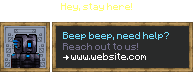
<style>
.page{position:relative;width:193px;height:72px;background:#292a2a}
.page>*{position:absolute;margin:0}
.t1{font:8px "Minecraft";color:#fffd75}
.t2{font:8px "Minecraft";color:#73dfff}
.t3{font:8px "Minecraft";color:#736f8b}
.t4{font:8px "Minecraft";color:#ffffff}
</style>
<div class="page">
<p class="t1" style="left:61px;top:3px;width:71px;height:8px">Hey, stay here!</p>
<p class="t2" style="left:63px;top:32px;width:106px;height:8px">Beep beep, need help?</p>
<p class="t3" style="left:63px;top:43px;width:75px;height:7px">Reach out to us!</p>
<p class="t4" style="left:71px;top:53px;width:75px;height:7px">www.website.com</p>
</div>
